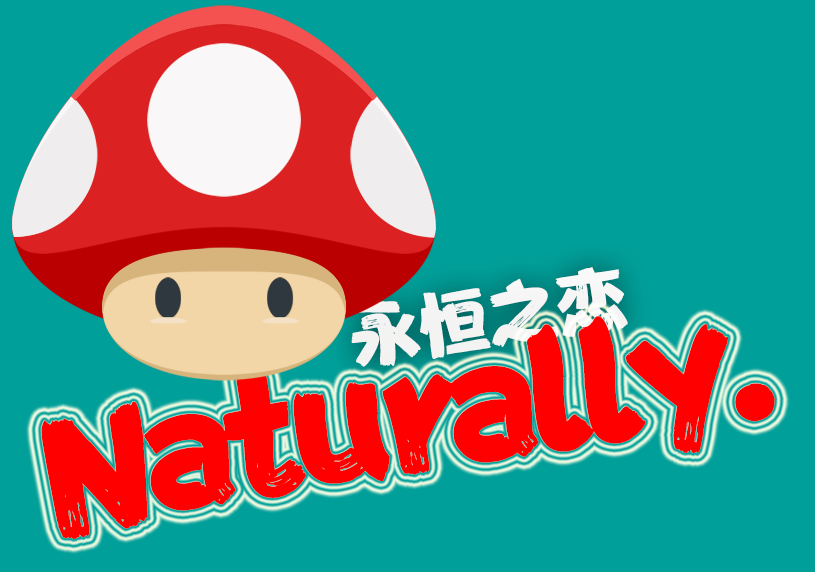
<style>
.page{position:relative;width:815px;height:572px;background:#019f99}
.page>*{position:absolute;margin:0}
.t1{font:69.6px "FZFENSTXJW--GB1-0";color:#ffffff}
.t2{font:151.2px "FZFENSTXJW--GB1-0";letter-spacing:-0.08em;color:#ff0000}
</style>
<div class="page">
<p class="t1" style="left:351px;top:267px;width:277px;height:100px;rotate:-9deg">永恒之恋</p>
<p class="t2" style="left:41px;top:316px;width:734px;height:224px;rotate:-9deg">Naturally.</p>
</div>
